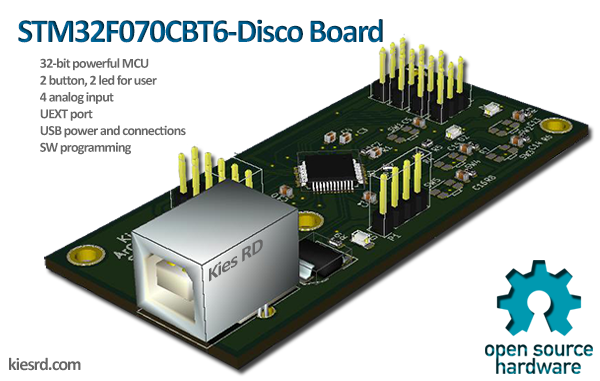
<style>
.page{position:relative;width:600px;height:381px;background:#ffffff}
.page>*{position:absolute;margin:0}
.t1{font:33.7px "Calibri-Bold";letter-spacing:-0.05em}
.t2{font:14px "Calibri-Bold";letter-spacing:-0.05em;color:#666666}
.t3{font:20px "Calibri-Bold";letter-spacing:-0.05em;color:#666666;scale:1.16 1}
.t4{font:18px "Calibri-Bold";letter-spacing:-0.05em;color:#666666}
</style>
<div class="page">
<p class="t1" style="left:18px;top:19px;width:365px;height:24px">STM32F070CBT6-Disco Board</p>
<p class="t2" style="left:40px;top:58px;width:146px;height:97px">32-bit powerful MCU<br>2 button, 2 led for user<br>4 analog input<br>UEXT port<br>USB power and connections<br>SW programming</p>
<p class="t3" style="left:209px;top:239px;width:54px;height:43px;rotate:-30deg">Kies RD</p>
<p class="t4" style="left:9px;top:357px;width:72px;height:14px">kiesrd.com</p>
</div>
